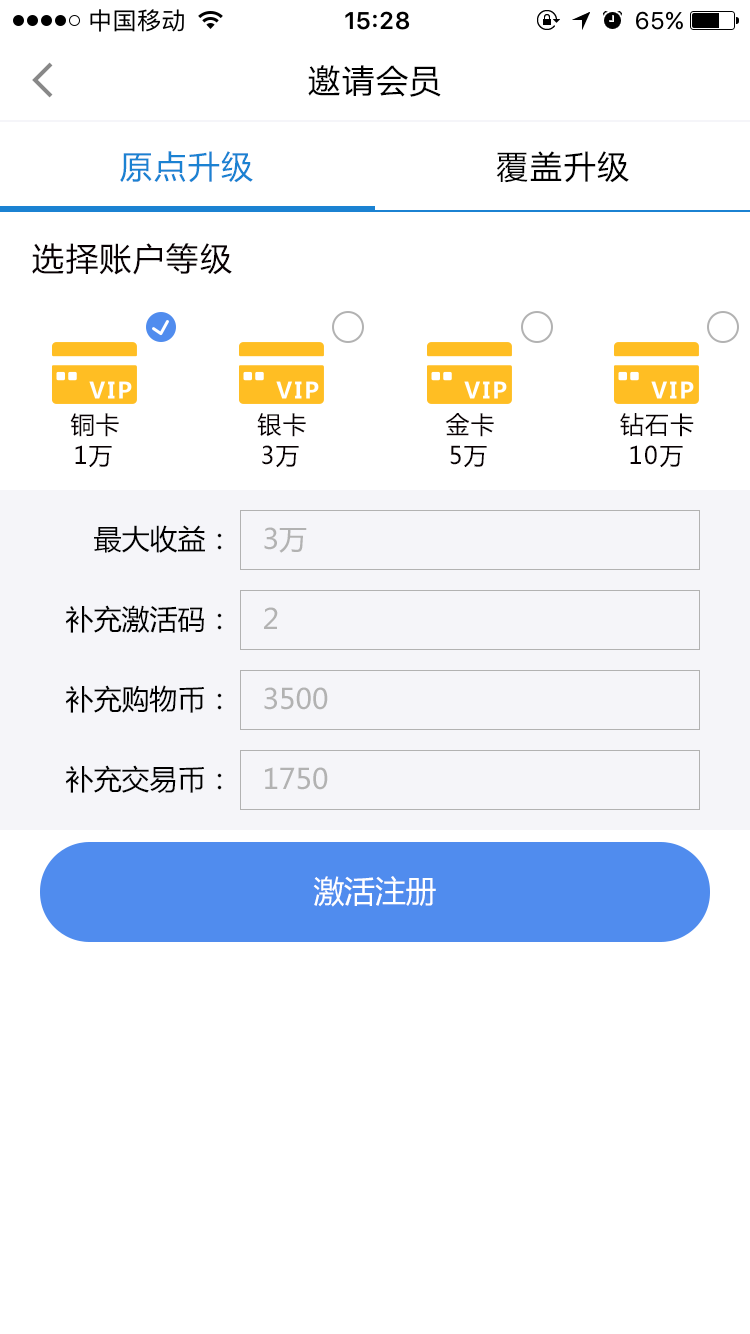
<style>
.page{position:relative;width:750px;height:1334px;background:#ffffff}
.page>*{position:absolute;margin:0}
.t1{font:32px "MicrosoftYaHei";letter-spacing:0.05em;color:#000000}
.t2{font:32px "MicrosoftYaHei";letter-spacing:0.05em;color:#1b82d2}
.t3{font:24px "MicrosoftYaHei";letter-spacing:0.05em;color:#000000}
.t4{font:28px "MicrosoftYaHei";color:#000000}
.t5{font:28px "MicrosoftYaHei";color:#b2b2b2}
.t6{font:30.7px "MicrosoftYaHei";color:#ffffff}
</style>
<div class="page">
<p class="t1" style="left:308px;top:65px;width:133px;height:32px">邀请会员</p>
<p class="t2" style="left:120px;top:151px;width:133px;height:32px">原点升级</p>
<p class="t1" style="left:496px;top:151px;width:133px;height:32px">覆盖升级</p>
<p class="t1" style="left:32px;top:243px;width:200px;height:32px">选择账户等级</p>
<p class="t3" style="left:70px;top:413px;width:49px;height:24px">铜卡</p>
<p class="t3" style="left:257px;top:413px;width:49px;height:24px">银卡</p>
<p class="t3" style="left:445px;top:413px;width:49px;height:24px">金卡</p>
<p class="t3" style="left:620px;top:413px;width:74px;height:24px">钻石卡</p>
<p class="t3" style="left:75px;top:445px;width:37px;height:23px">1万</p>
<p class="t3" style="left:262px;top:445px;width:37px;height:23px">3万</p>
<p class="t3" style="left:450px;top:445px;width:37px;height:23px">5万</p>
<p class="t3" style="left:630px;top:445px;width:53px;height:23px">10万</p>
<p class="t4" style="left:94px;top:525px;width:128px;height:28px">最大收益：</p>
<p class="t5" style="left:264px;top:527px;width:43px;height:26px">3万</p>
<p class="t4" style="left:65px;top:605px;width:157px;height:28px">补充激活码：</p>
<p class="t5" style="left:264px;top:607px;width:14px;height:22px">2</p>
<p class="t4" style="left:65px;top:685px;width:157px;height:28px">补充购物币：</p>
<p class="t5" style="left:264px;top:687px;width:64px;height:23px">3500</p>
<p class="t4" style="left:65px;top:765px;width:157px;height:28px">补充交易币：</p>
<p class="t5" style="left:265px;top:767px;width:63px;height:23px">1750</p>
<p class="t6" style="left:313px;top:876px;width:123px;height:31px">激活注册</p>
</div>
